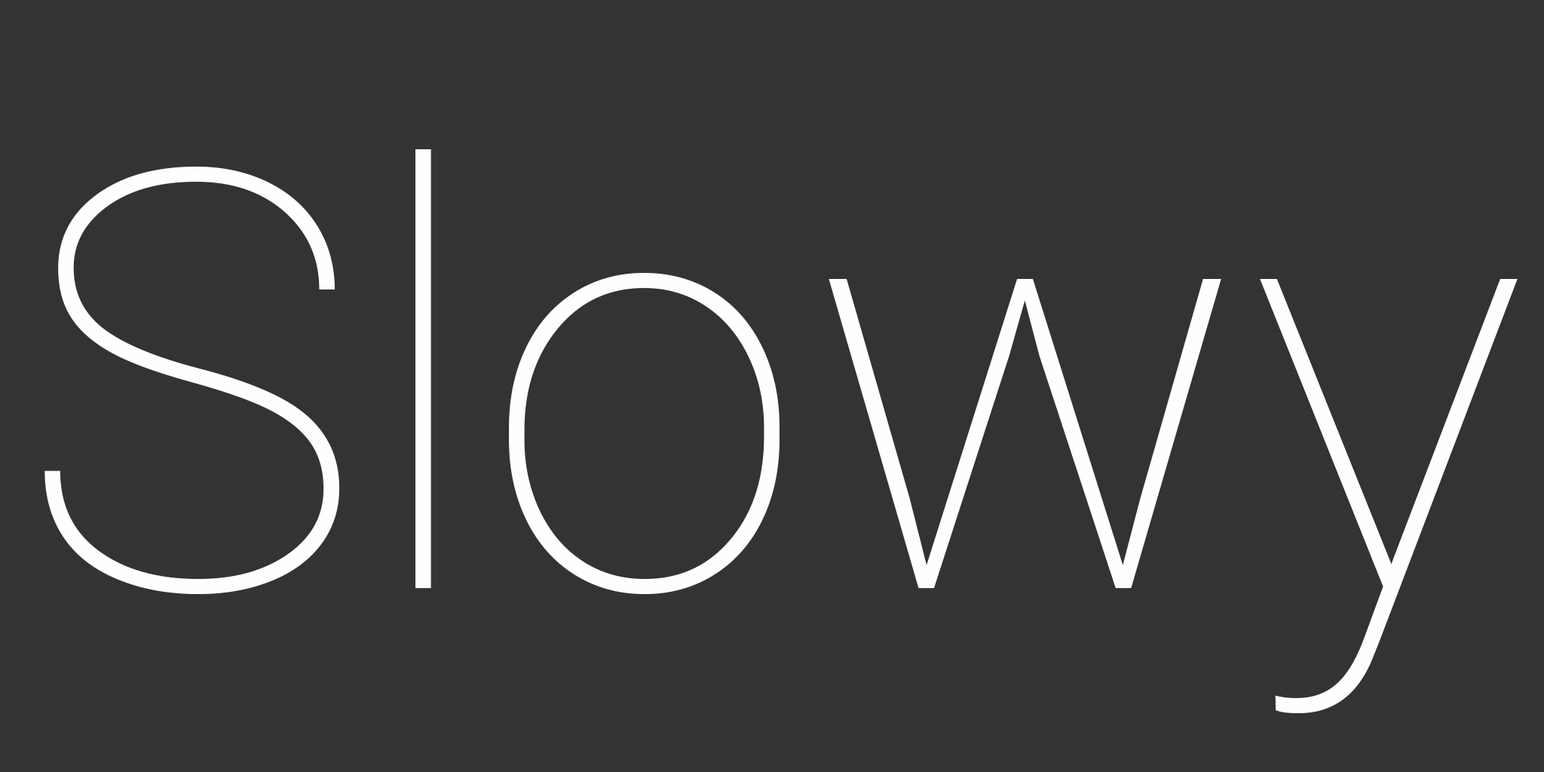
<style>
.page{position:relative;width:1544px;height:772px;background:#333333}
.page>*{position:absolute;margin:0}
.t1{font:584.9px "Roboto-Thin";color:#fefefe}
</style>
<div class="page">
<p class="t1" style="left:44px;top:149px;width:1474px;height:564px">Slowy</p>
</div>
